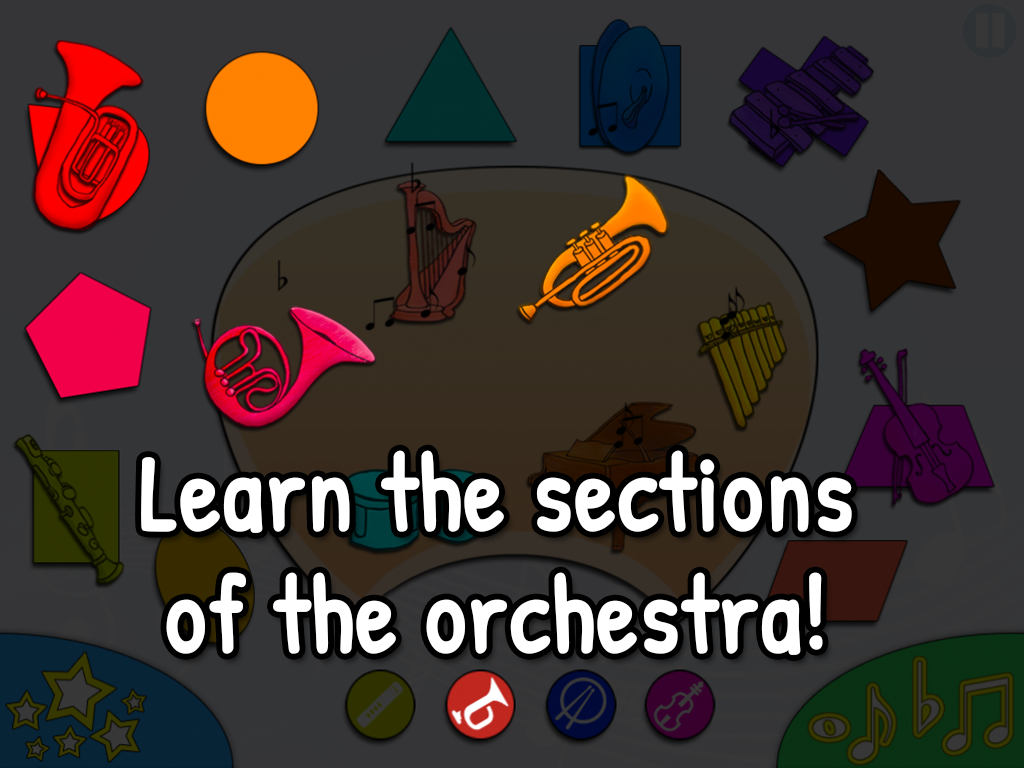
<style>
.page{position:relative;width:1024px;height:768px}
.page>*{position:absolute;margin:0}
.t1{font:109.1px "PatrickHand-Regular";color:#ffffff;font-weight:bold;scale:0.93 1}
</style>
<div class="page">
<p class="t1" style="left:141px;top:450px;width:711px;height:205px;text-align:center">Learn the sections <br>of the orchestra!</p>
</div>
